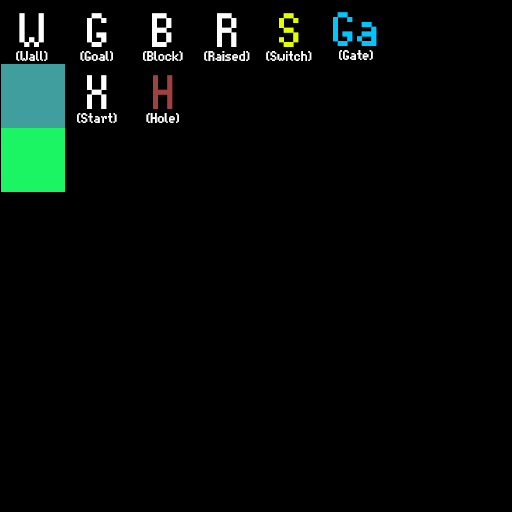
<style>
.page{position:relative;width:512px;height:512px;background:#000000}
.page>*{position:absolute;margin:0}
.t1{font:48px "AdvoCut";color:#ffffff}
.t2{font:48px "AdvoCut";color:#e4ff00}
.t3{font:48px "AdvoCut";color:#00c6ff}
.t4{font:14px "AdvoCut";color:#ffffff}
.t5{font:48px "AdvoCut";color:#9f4141}
</style>
<div class="page">
<p class="t1" style="left:19px;top:13px;width:25px;height:34px">W</p>
<p class="t1" style="left:87px;top:13px;width:20px;height:34px">G</p>
<p class="t1" style="left:152px;top:13px;width:20px;height:34px">B</p>
<p class="t1" style="left:217px;top:13px;width:20px;height:34px">R</p>
<p class="t2" style="left:279px;top:13px;width:20px;height:34px">S</p>
<p class="t3" style="left:333px;top:12px;width:44px;height:34px">Ga</p>
<p class="t4" style="left:16px;top:51px;width:32px;height:10px">(Wall)</p>
<p class="t4" style="left:80px;top:51px;width:33px;height:10px">(Goal)</p>
<p class="t4" style="left:143px;top:51px;width:40px;height:10px">(Block)</p>
<p class="t4" style="left:204px;top:51px;width:46px;height:10px">(Raised)</p>
<p class="t4" style="left:266px;top:51px;width:46px;height:10px">(Switch)</p>
<p class="t4" style="left:339px;top:50px;width:34px;height:10px">(Gate)</p>
<p class="t1" style="left:87px;top:75px;width:20px;height:34px">X</p>
<p class="t5" style="left:153px;top:75px;width:20px;height:34px">H</p>
<p class="t4" style="left:77px;top:113px;width:40px;height:10px">(Start)</p>
<p class="t4" style="left:146px;top:113px;width:33px;height:10px">(Hole)</p>
</div>
